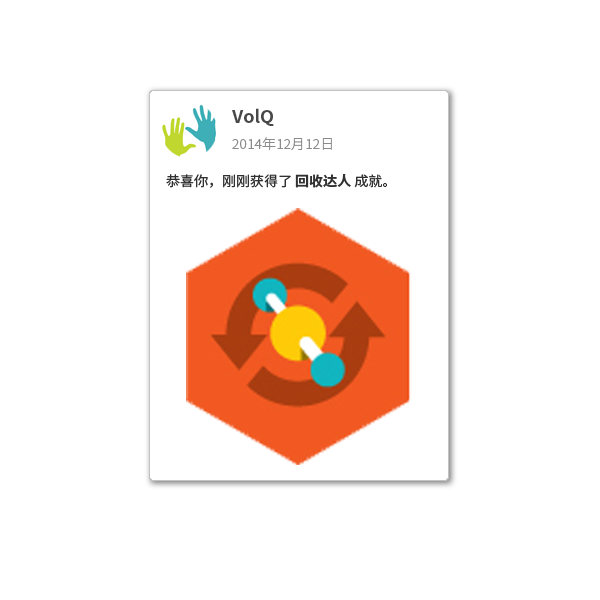
<style>
.page{position:relative;width:600px;height:600px;background:#ffffff}
.page>*{position:absolute;margin:0}
.t1{font:17.6px "NotoSansCJKsc-Bold";color:#484848}
.t2{font:13.7px "NotoSansCJKsc-Light";color:#8b8b8b}
.t3{font:13.7px "NotoSansCJKsc-Regular";color:#313131}
.t4{font:13.7px "NotoSansCJKsc-Bold";color:#313131}
</style>
<div class="page">
<p class="t1" style="left:232px;top:108px;width:42px;height:18px">VolQ</p>
<p class="t2" style="left:232px;top:137px;width:100px;height:14px">2014年12月12日</p>
<p class="t3" style="left:166px;top:174px;width:221px;height:14px">恭喜你，刚刚获得了 <span class="t4">回收达人</span> 成就。</p>
</div>
